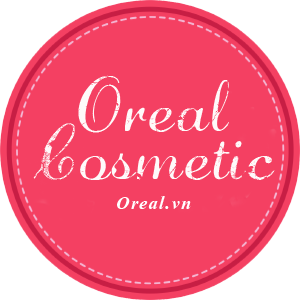
<style>
.page{position:relative;width:300px;height:300px;background:#f44062}
.page>*{position:absolute;margin:0}
.t1{font:72px/16px "Diamond-Dust";letter-spacing:0.05em;color:#fefafa}
.t2{font:24px "Kokila-BoldItalic";letter-spacing:0.05em;color:#ffffff}
</style>
<div class="page">
<p class="t1" style="left:33px;top:75px;width:242px;height:105px;text-align:center">Oreal<br><br><br>Cosmetic</p>
<p class="t2" style="left:117px;top:196px;width:74px;height:13px">Oreal.vn</p>
</div>
